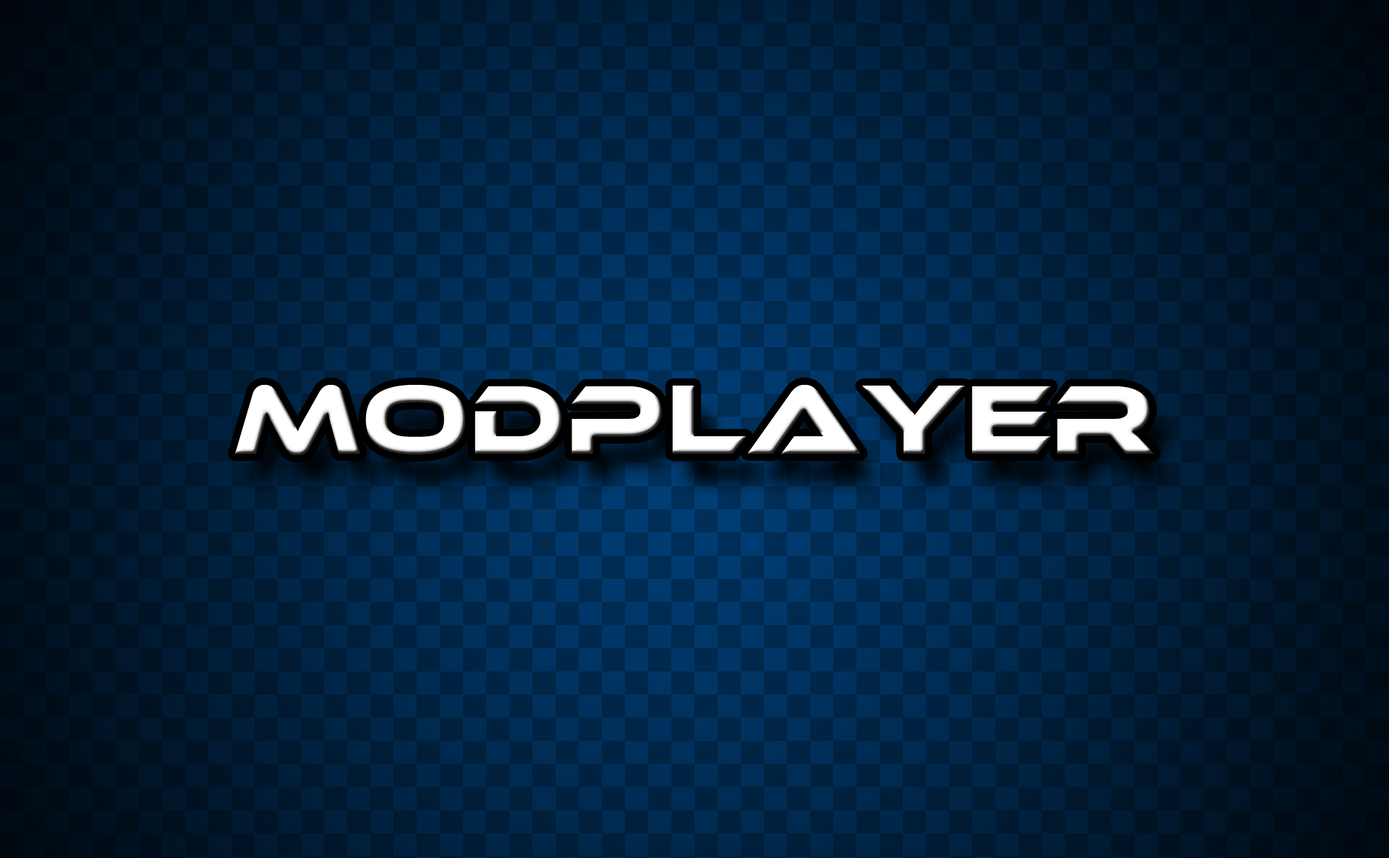
<style>
.page{position:relative;width:1389px;height:858px}
.page>*{position:absolute;margin:0}
.t1{font:101.3px "EthnocentricRg-Regular";color:#ffffff}
</style>
<div class="page">
<p class="t1" style="left:235px;top:385px;width:919px;height:70px">MODPLAYER</p>
</div>
